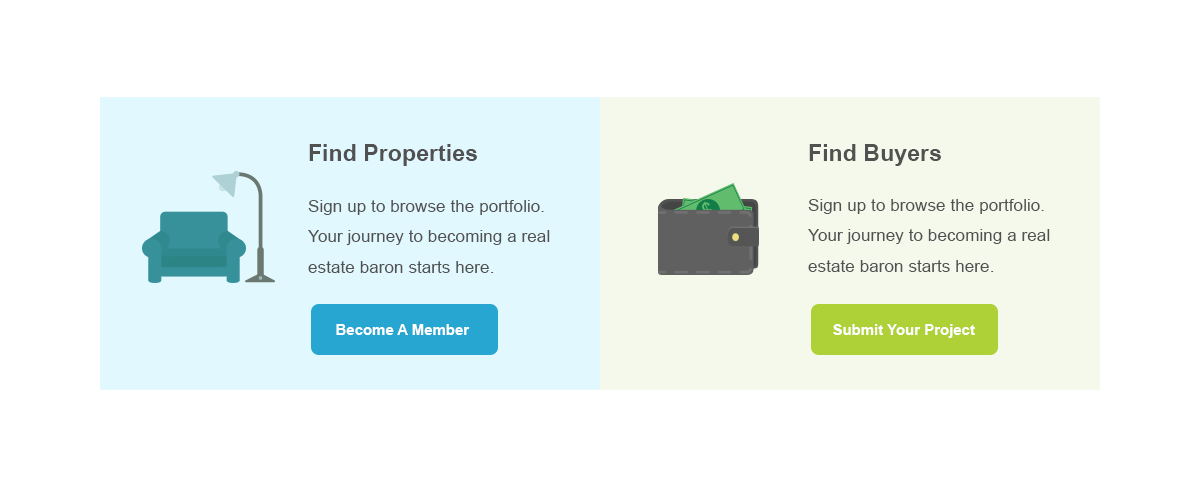
<style>
.page{position:relative;width:1200px;height:500px;background:#ffffff}
.page>*{position:absolute;margin:0}
.t1{font:23.2px "Arial-BoldMT";color:#515151}
.t2{font:17.2px "ArialMT";color:#515151}
.t3{font:14.8px "Arial-BoldMT";color:#ffffff}
</style>
<div class="page">
<p class="t1" style="left:309px;top:144px;width:168px;height:22px">Find Properties</p>
<p class="t1" style="left:809px;top:144px;width:132px;height:22px">Find Buyers</p>
<p class="t2" style="left:308px;top:200px;width:242px;height:73px">Sign up to browse the portfolio.<br>Your journey to becoming a real estate baron starts here.</p>
<p class="t2" style="left:808px;top:199px;width:242px;height:73px">Sign up to browse the portfolio.<br>Your journey to becoming a real estate baron starts here.</p>
<p class="t3" style="left:336px;top:324px;width:134px;height:11px">Become A Member</p>
<p class="t3" style="left:833px;top:324px;width:142px;height:14px">Submit Your Project</p>
</div>
